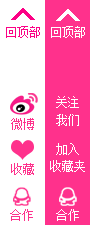
<style>
.page{position:relative;width:90px;height:225px;background:#ff318c}
.page>*{position:absolute;margin:0}
.t1{font:12px "NSimSun";color:#fc0185}
.t2{font:12px "NSimSun";color:#ffffff}
.t3{font:12px "NSimSun";color:#ff318c}
</style>
<div class="page">
<p class="t1" style="left:6px;top:26px;width:34px;height:12px">回顶部</p>
<p class="t2" style="left:51px;top:26px;width:34px;height:12px">回顶部</p>
<p class="t2" style="left:56px;top:96px;width:23px;height:12px">关注</p>
<p class="t3" style="left:11px;top:118px;width:23px;height:12px">微博</p>
<p class="t2" style="left:56px;top:114px;width:23px;height:12px">我们</p>
<p class="t2" style="left:56px;top:143px;width:23px;height:12px">加入</p>
<p class="t2" style="left:50px;top:160px;width:35px;height:12px">收藏夹</p>
<p class="t3" style="left:11px;top:163px;width:23px;height:12px">收藏</p>
<p class="t3" style="left:10px;top:209px;width:23px;height:12px">合作</p>
<p class="t2" style="left:56px;top:209px;width:23px;height:12px">合作</p>
</div>
